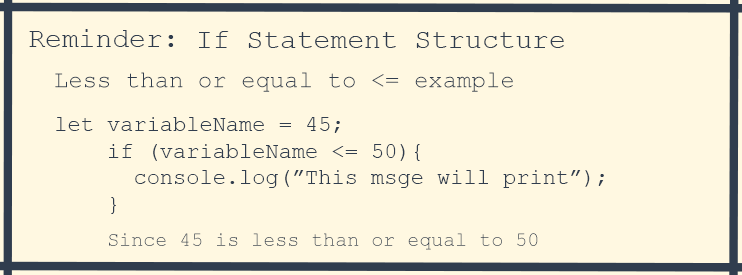
<style>
.page{position:relative;width:742px;height:275px;background:#fff8e1}
.page>*{position:absolute;margin:0}
.t1{font:28px "CourierNewPSMT";color:#303d4e}
.t2{font:24px "CourierNewPSMT";color:#303d4e}
.t3{font:22px "CourierNewPSMT";color:#303d4e}
.t4{font:24px "CourierNewPS-BoldItalicMT";color:#303d4e}
.t5{font:20px "CourierNewPSMT";color:#303d4e}
</style>
<div class="page">
<p class="t1" style="left:29px;top:29px;width:145px;height:18px">Reminder:</p>
<p class="t1" style="left:199px;top:31px;width:365px;height:17px">If Statement Structure</p>
<p class="t2" style="left:55px;top:72px;width:458px;height:20px">Less than or equal to &lt;= example</p>
<p class="t3" style="left:56px;top:117px;width:548px;height:97px"><span class="t4">  <br><br> </span>let variableName = 45;<br>     if (variableName &lt;= 50){<br>       console.log(”This msge will print”);<br>     }</p>
<p class="t5" style="left:109px;top:233px;width:429px;height:17px">Since 45 is less than or equal to 50</p>
</div>
